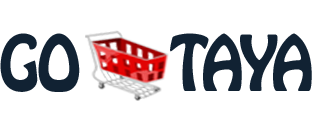
<style>
.page{position:relative;width:313px;height:135px;background:#ffffff}
.page>*{position:absolute;margin:0}
.t1{font:68px "HoboStd";letter-spacing:-0.04em;color:#112233;scale:0.9 1}
</style>
<div class="page">
<p class="t1" style="left:0px;top:33px;width:312px;height:59px">GO      TAYA</p>
</div>
